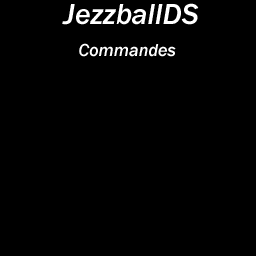
<style>
.page{position:relative;width:256px;height:256px;background:#000000}
.page>*{position:absolute;margin:0}
.t1{font:30px "FranklinGothic-MediumItalic";color:#ffffff}
.t2{font:18px "FranklinGothic-MediumItalic";color:#ffffff}
</style>
<div class="page">
<p class="t1" style="left:62px;top:3px;width:137px;height:22px">JezzballDS</p>
<p class="t2" style="left:79px;top:43px;width:97px;height:14px">Commandes</p>
</div>
